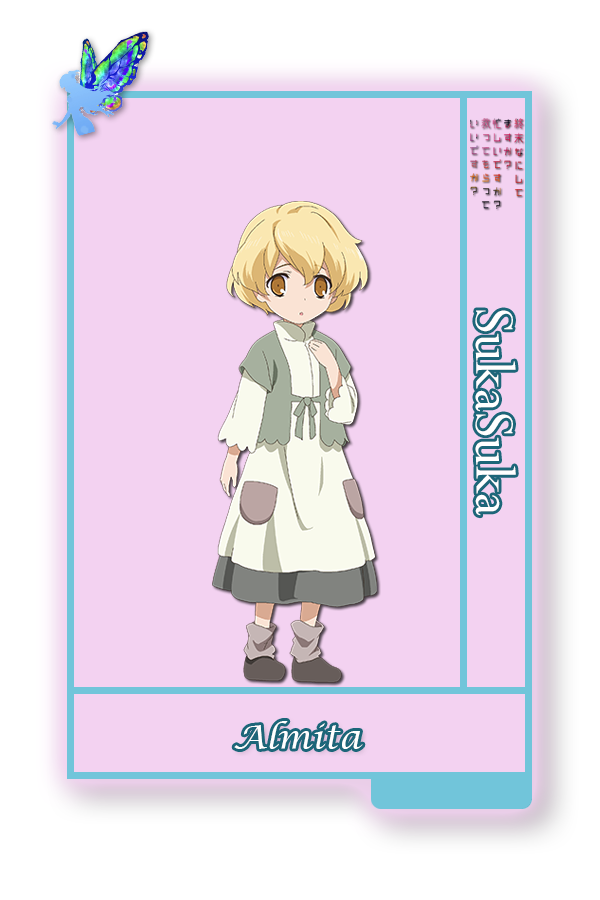
<style>
.page{position:relative;width:600px;height:900px;background:#f3d2f1}
.page>*{position:absolute;margin:0}
.t1{font:62.5px "Perpetua";color:#ffffff}
.t2{font:33.3px "LucidaCalligraphy-Italic";color:#ffffff}
</style>
<div class="page">
<p class="t1" style="left:475px;top:310px;width:41px;height:206px;rotate:90deg">SukaSuka</p>
<p class="t2" style="left:234px;top:721px;width:129px;height:28px">Almita</p>
</div>
